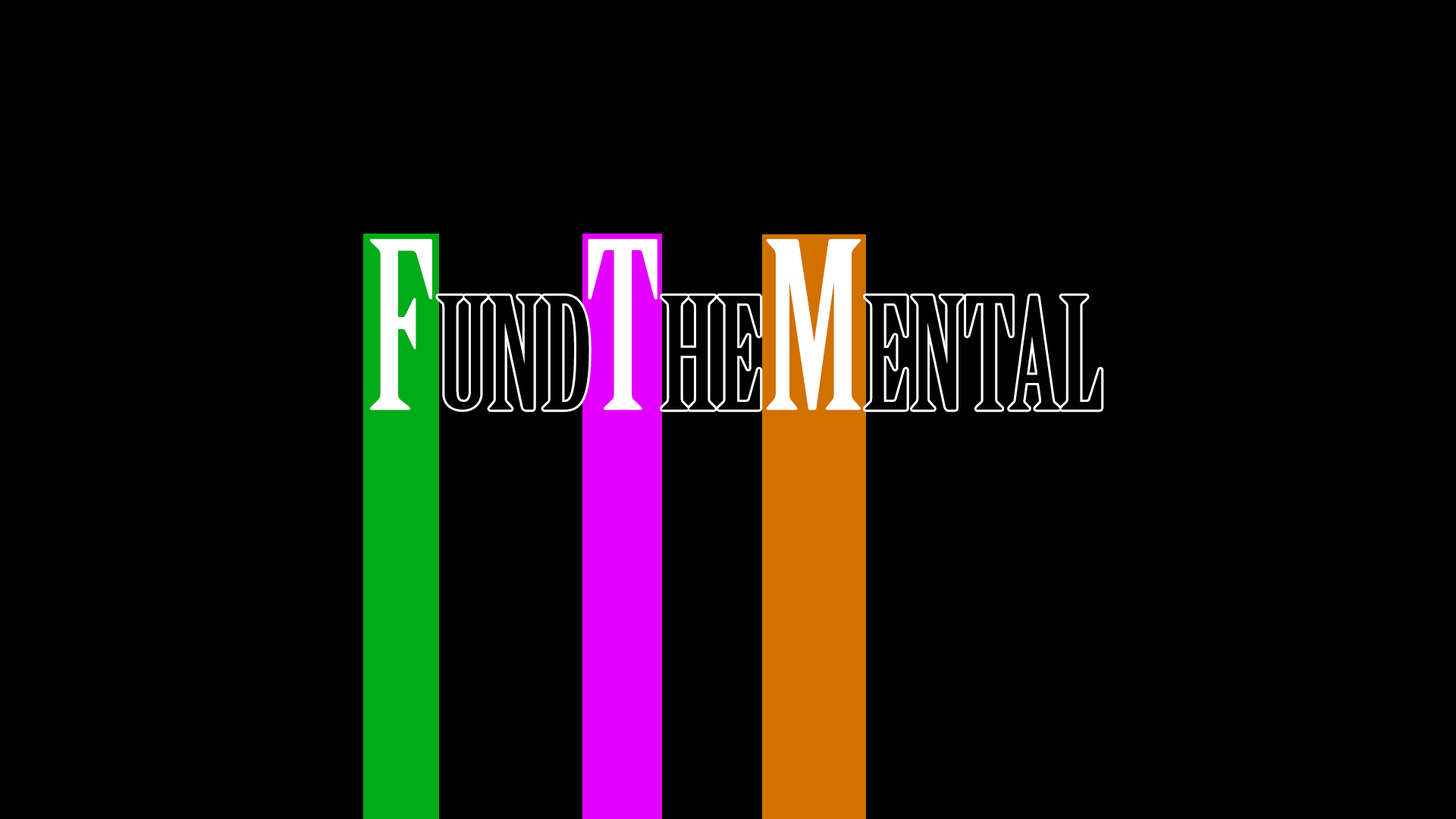
<style>
.page{position:relative;width:1456px;height:819px;background:#000000}
.page>*{position:absolute;margin:0}
.t1{font:227.5px "BirchStd";color:#ffffff}
.t2{font:151.7px "BirchStd";color:#000000}
</style>
<div class="page">
<p class="t1" style="left:370px;top:239px;width:62px;height:171px">F</p>
<p class="t1" style="left:588px;top:239px;width:69px;height:171px">T</p>
<p class="t1" style="left:766px;top:239px;width:95px;height:171px">M</p>
<p class="t2" style="left:438px;top:296px;width:151px;height:114px">UND</p>
<p class="t2" style="left:662px;top:296px;width:99px;height:114px">HE</p>
<p class="t2" style="left:865px;top:296px;width:237px;height:114px">ENTAL</p>
</div>
